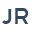
<style>
.page{position:relative;width:32px;height:32px;background:#ffffff}
.page>*{position:absolute;margin:0}
.t1{font:29px "Telegrafico";color:#34495e}
</style>
<div class="page">
<p class="t1" style="left:2px;top:8px;width:27px;height:16px">JR</p>
</div>
